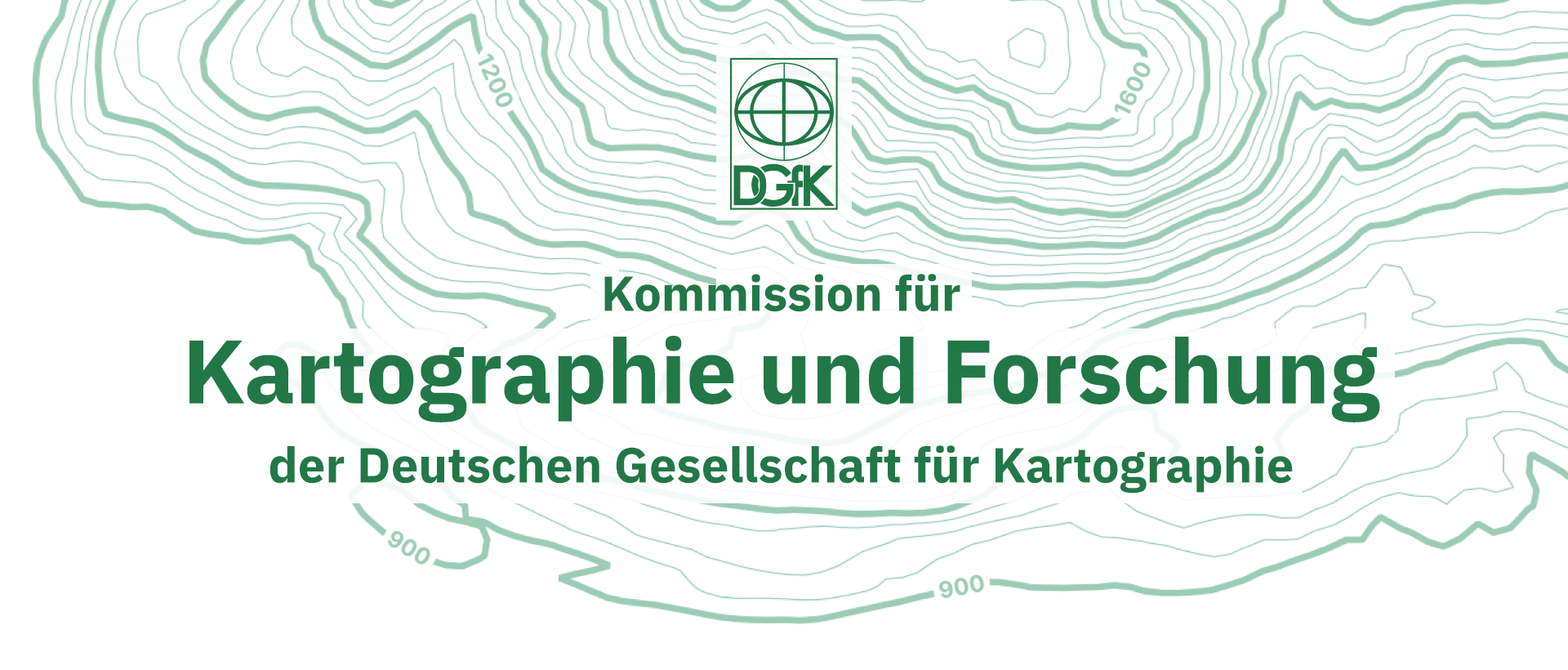
<style>
.page{position:relative;width:1568px;height:670px;background:#ffffff}
.page>*{position:absolute;margin:0}
.t1{font:49px/79.2px "IBMPlexSans-Bold";color:#217846}
.t2{font:49px "IBMPlexSans-Bold";color:#217846}
.t3{font:89.8px/92.3px "IBMPlexSans-Bold";color:#217846}
</style>
<div class="page">
<p class="t1" style="left:189px;top:274px;width:1191px;height:219px;text-align:center"><span class="t2">Kommission für<br></span><span class="t3">Kartographie und Forschung<br></span>der Deutschen Gesellschaft für Kartographie</p>
</div>
